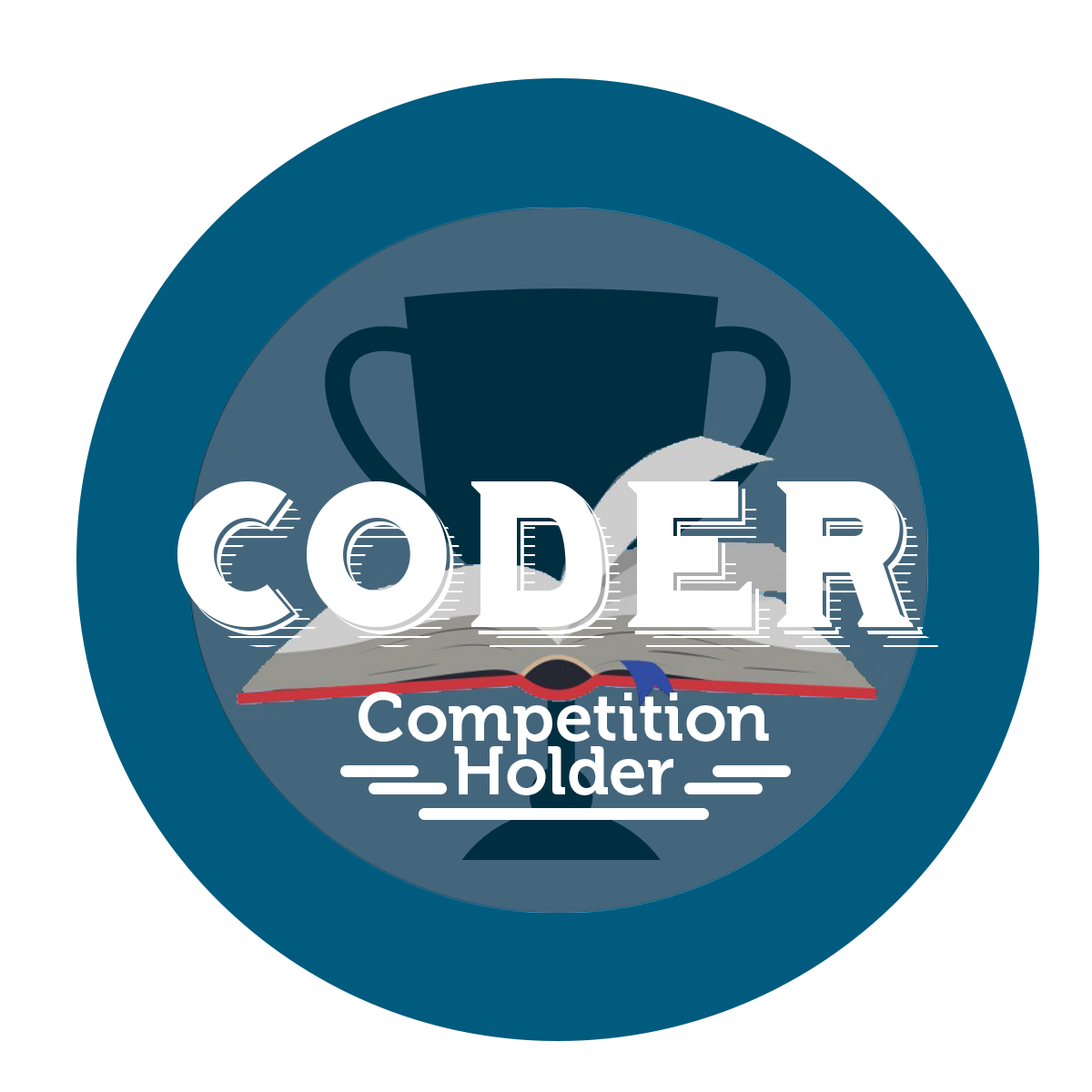
<style>
.page{position:relative;width:1092px;height:1092px;background:#ffffff}
.page>*{position:absolute;margin:0}
.t1{font:182px "Hominis";color:#ffffff}
.t2{font:68.2px/53.1px "Museo-700";color:#ffffff}
</style>
<div class="page">
<p class="t1" style="left:177px;top:481px;width:762px;height:166px">CODER</p>
<p class="t2" style="left:359px;top:692px;width:410px;height:103px;text-align:center">Competition<br>Holder</p>
</div>
